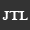
<style>
.page{position:relative;width:30px;height:30px;background:#333333}
.page>*{position:absolute;margin:0}
.t1{font:13.9px "BellMTBold";color:#ffffff}
</style>
<div class="page">
<p class="t1" style="left:2px;top:11px;width:26px;height:9px">JTL</p>
</div>
